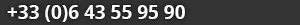
<style>
.page{position:relative;width:300px;height:25px;background:#333333}
.page>*{position:absolute;margin:0}
.t1{font:19px "OpenSans-Bold";color:#ffffff}
</style>
<div class="page">
<p class="t1" style="left:7px;top:5px;width:178px;height:17px">+33 (0)6 43 55 95 90</p>
</div>
